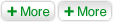
<style>
.page{position:relative;width:113px;height:22px}
.page>*{position:absolute;margin:0}
.t1{font:16.9px "Helvetica-Bold";color:#009122}
.t2{font:13px "Helvetica";color:#009122}
</style>
<div class="page">
<p class="t1" style="left:7px;top:6px;width:10px;height:10px">+</p>
<p class="t2" style="left:21px;top:6px;width:29px;height:11px">More</p>
<p class="t1" style="left:64px;top:6px;width:10px;height:10px">+</p>
<p class="t2" style="left:78px;top:6px;width:29px;height:11px">More</p>
</div>
